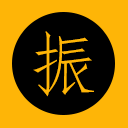
<style>
.page{position:relative;width:128px;height:128px;background:#feb507}
.page>*{position:absolute;margin:0}
.t1{font:70px "FangSong";color:#feb507}
</style>
<div class="page">
<p class="t1" style="left:33px;top:31px;width:61px;height:66px">振</p>
</div>
